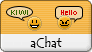
<style>
.page{position:relative;width:92px;height:52px}
.page>*{position:absolute;margin:0}
.t1{font:7px "ArialMT";letter-spacing:0.1em;color:#336600}
.t2{font:7px "ArialMT";color:#dc0000}
.t3{font:13px "TempusSansITC";color:#000000}
</style>
<div class="page">
<p class="t1" style="left:11px;top:10px;width:17px;height:5px">KiWi</p>
<p class="t2" style="left:61px;top:10px;width:16px;height:5px">Hello</p>
<p class="t3" style="left:30px;top:36px;width:32px;height:12px">aChat</p>
</div>
